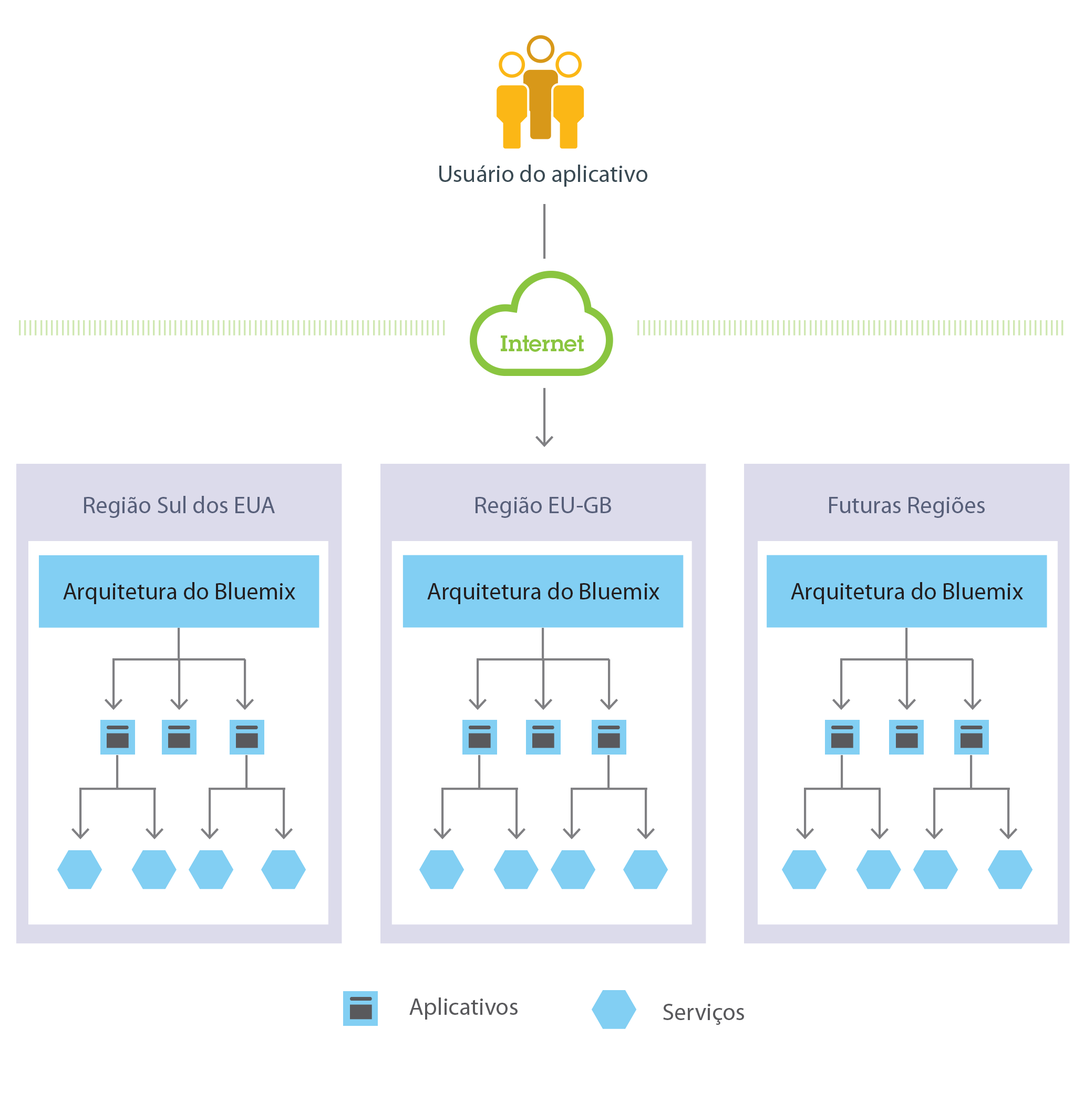
<style>
.page{position:relative;width:1084px;height:1100px;background:#ffffff}
.page>*{position:absolute;margin:0}
.t1{font:24.1px "MyriadPro-Regular";color:#3b4b54}
.t2{font:21.9px "LubalinDemiforIBM";color:#8ac540}
.t3{font:24.1px "MyriadPro-Regular";color:#58607a}
.t4{font:24.1px "MyriadPro-Regular";color:#231f20}
.t5{font:24.1px "MyriadPro-Regular";color:#59595c}
</style>
<div class="page">
<p class="t1" style="left:439px;top:165px;width:209px;height:22px">Usuário do aplicativo</p>
<p class="t2" style="left:501px;top:335px;width:83px;height:17px">Internet</p>
<p class="t3" style="left:84px;top:496px;width:191px;height:22px">Região Sul dos EUA</p>
<p class="t3" style="left:476px;top:497px;width:135px;height:21px">Região EU-GB</p>
<p class="t3" style="left:829px;top:497px;width:156px;height:21px">Futuras Regiões</p>
<p class="t4" style="left:63px;top:582px;width:232px;height:22px">Arquitetura do Bluemix</p>
<p class="t4" style="left:427px;top:582px;width:233px;height:22px">Arquitetura do Bluemix</p>
<p class="t4" style="left:791px;top:582px;width:232px;height:22px">Arquitetura do Bluemix</p>
<p class="t5" style="left:409px;top:997px;width:109px;height:22px">Aplicativos</p>
<p class="t5" style="left:663px;top:1003px;width:81px;height:21px">Serviços</p>
</div>
